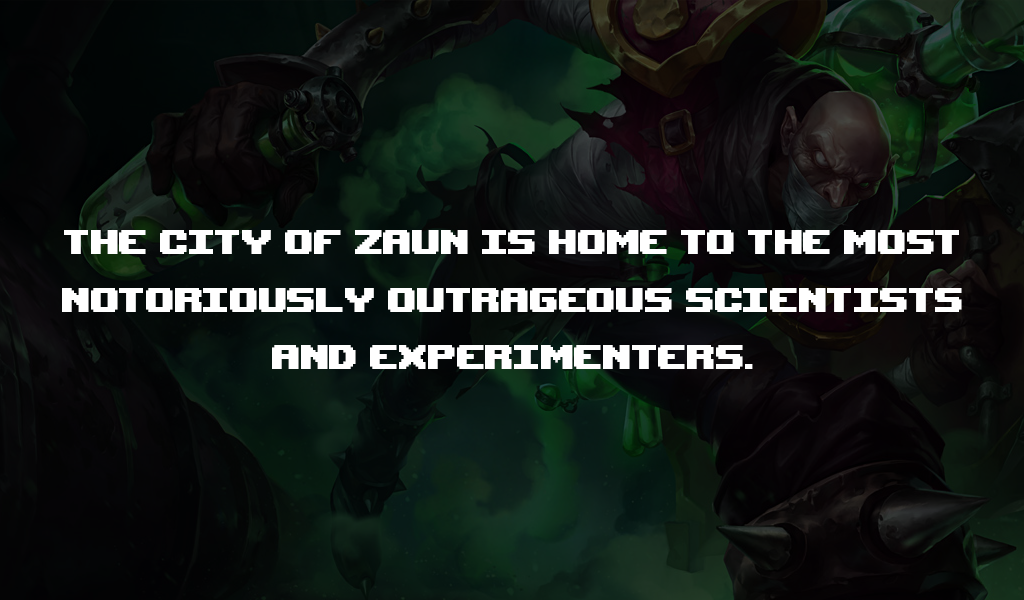
<style>
.page{position:relative;width:1024px;height:600px}
.page>*{position:absolute;margin:0}
.t1{font:48px "UpheavalPro-Regular";color:#ffffff}
</style>
<div class="page">
<p class="t1" style="left:62px;top:230px;width:900px;height:139px;text-align:center">The city of zaun is home to the most<br>notoriously outrageous scientists<br>and experimenters.</p>
</div>
